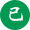
<style>
.page{position:relative;width:30px;height:30px;background:#009953}
.page>*{position:absolute;margin:0}
.t1{font:20px "GBWeiBei-Bold";color:#ffffff}
</style>
<div class="page">
<p class="t1" style="left:9px;top:7px;width:14px;height:14px">已</p>
</div>
